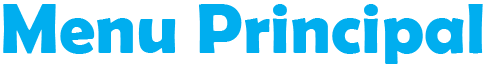
<style>
.page{position:relative;width:485px;height:64px;background:#ffffff}
.page>*{position:absolute;margin:0}
.t1{font:72px "BerlinSansFBDemi-Bold";color:#00aeef}
</style>
<div class="page">
<p class="t1" style="left:3px;top:4px;width:480px;height:60px">Menu Principal</p>
</div>
